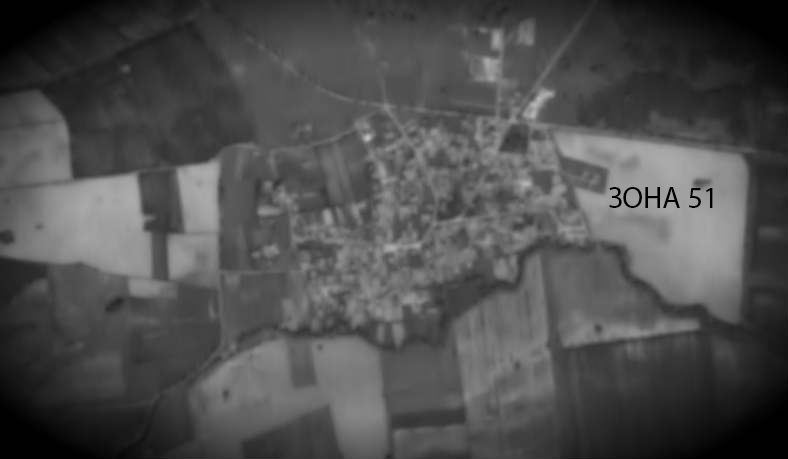
<style>
.page{position:relative;width:788px;height:459px}
.page>*{position:absolute;margin:0}
.t1{font:30px "MyriadPro-Regular";color:#000000}
</style>
<div class="page">
<p class="t1" style="left:609px;top:187px;width:104px;height:21px">ЗОНА 51</p>
</div>
